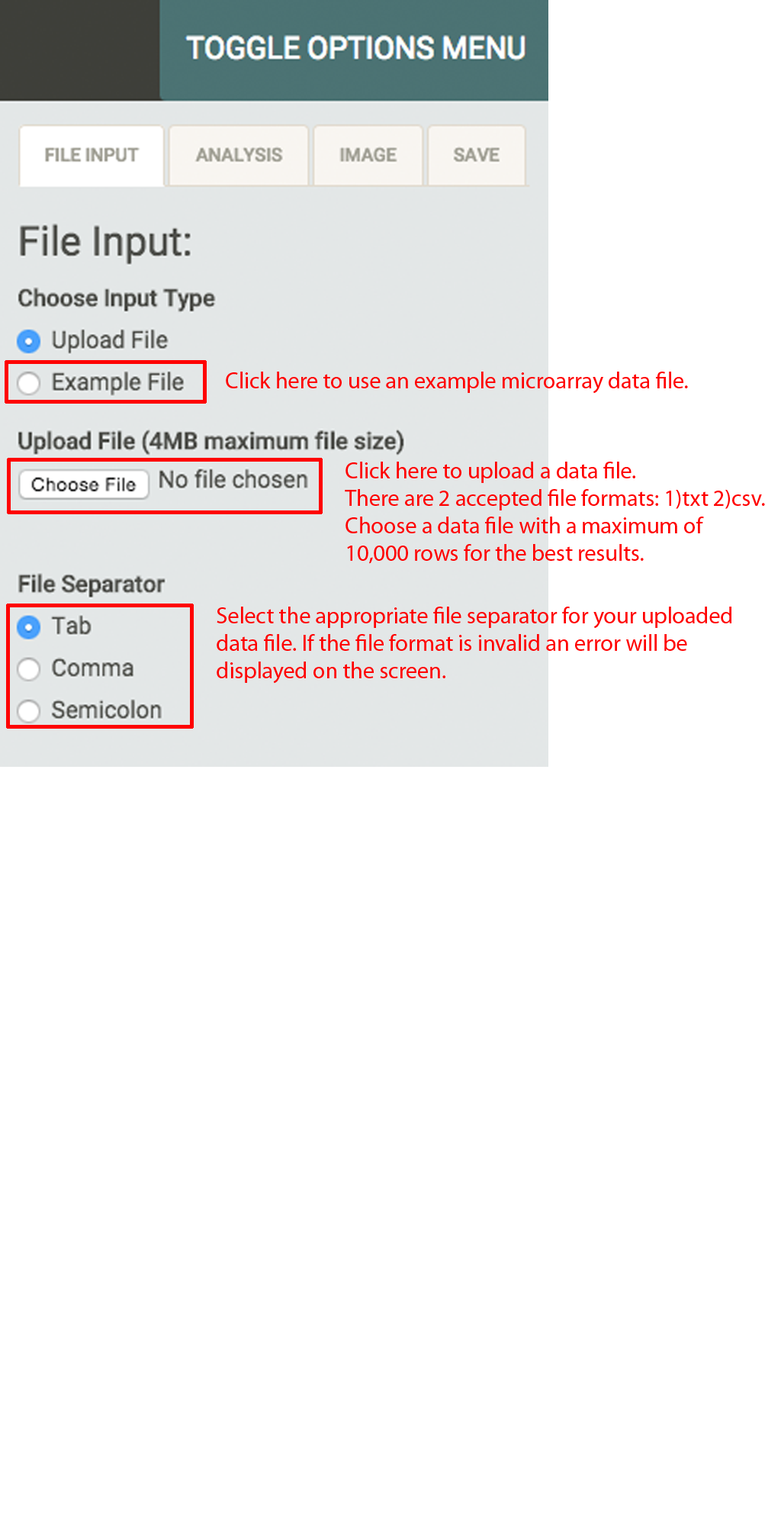
<style>
.page{position:relative;width:781px;height:1526px;background:#ffffff}
.page>*{position:absolute;margin:0}
.t1{font:22.9px "MyriadPro-Regular";color:#ff0000}
</style>
<div class="page">
<p class="t1" style="left:226px;top:372px;width:462px;height:22px">Click here to use an example microarray data file.</p>
<p class="t1" style="left:345px;top:462px;width:420px;height:102px">Click here to upload a data file. <br>There are 2 accepted file formats: 1)txt 2)csv.<br>Choose a data file with a maximum of <br>10,000 rows for the best results.</p>
<p class="t1" style="left:217px;top:607px;width:515px;height:77px">Select the appropriate file separator for your uploaded<br>data file. If the file format is invalid an error will be <br>displayed on the screen.</p>
</div>
